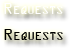
<style>
.page{position:relative;width:70px;height:48px}
.page>*{position:absolute;margin:0}
.t1{font:17px "OCRAExtended";color:#ffffff;font-variant:small-caps}
.t2{font:17px "OCRAExtended";color:#000000;font-variant:small-caps}
</style>
<div class="page">
<p class="t1" style="left:4px;top:3px;width:59px;height:11px">Requests</p>
<p class="t2" style="left:4px;top:29px;width:59px;height:11px">Requests</p>
</div>
